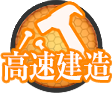
<style>
.page{position:relative;width:112px;height:93px;background:#ffffff}
.page>*{position:absolute;margin:0}
.t1{font:31.9px "RyuminPro-ExBold";letter-spacing:-0.02em;color:#fefefe;scale:0.88 1}
</style>
<div class="page">
<p class="t1" style="left:3px;top:50px;width:107px;height:31px">高速建造</p>
</div>
